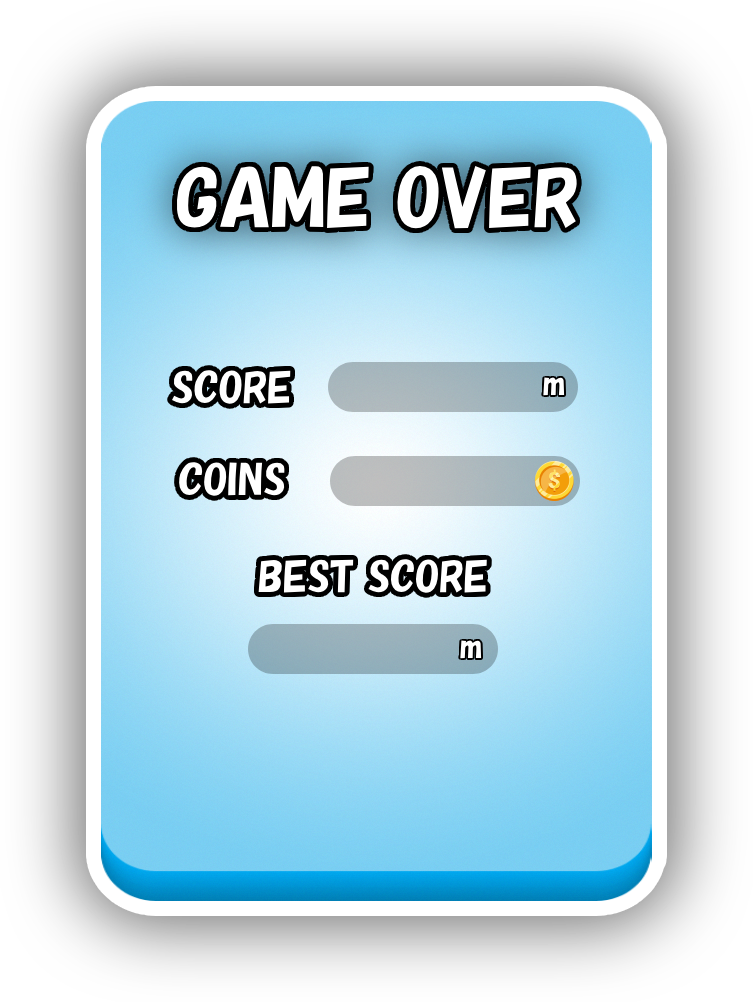
<style>
.page{position:relative;width:753px;height:1002px}
.page>*{position:absolute;margin:0}
.t1{font:75px "HGPSoeiKakupoptai";color:#ffffff}
.t2{font:40px "HGPSoeiKakupoptai";color:#ffffff}
.t3{font:30px "HGPSoeiKakupoptai";color:#ffffff}
</style>
<div class="page">
<p class="t1" style="left:176px;top:166px;width:402px;height:63px">GAME OVER</p>
<p class="t2" style="left:172px;top:369px;width:119px;height:36px">SCORE</p>
<p class="t3" style="left:543px;top:377px;width:22px;height:19px">m</p>
<p class="t2" style="left:178px;top:461px;width:107px;height:36px">COINS</p>
<p class="t2" style="left:258px;top:558px;width:229px;height:36px">BEST SCORE</p>
<p class="t3" style="left:460px;top:640px;width:22px;height:19px">m</p>
</div>
